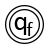
<style>
.page{position:relative;width:50px;height:50px;background:#ffffff}
.page>*{position:absolute;margin:0}
.t1{font:28px "Calibri";color:#000000}
.t2{font:20px "Calibri";color:#000000}
</style>
<div class="page">
<p class="t1" style="left:14px;top:17px;width:13px;height:18px">q</p>
<p class="t2" style="left:26px;top:22px;width:7px;height:14px">f</p>
</div>
